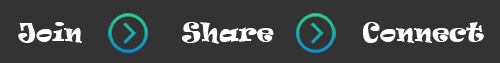
<style>
.page{position:relative;width:500px;height:63px;background:#333333}
.page>*{position:absolute;margin:0}
.t1{font:23.6px "Ravie";color:#ffffff}
</style>
<div class="page">
<p class="t1" style="left:18px;top:22px;width:65px;height:21px">Join</p>
<p class="t1" style="left:182px;top:22px;width:92px;height:22px">Share</p>
<p class="t1" style="left:363px;top:22px;width:121px;height:21px">Connect</p>
</div>
